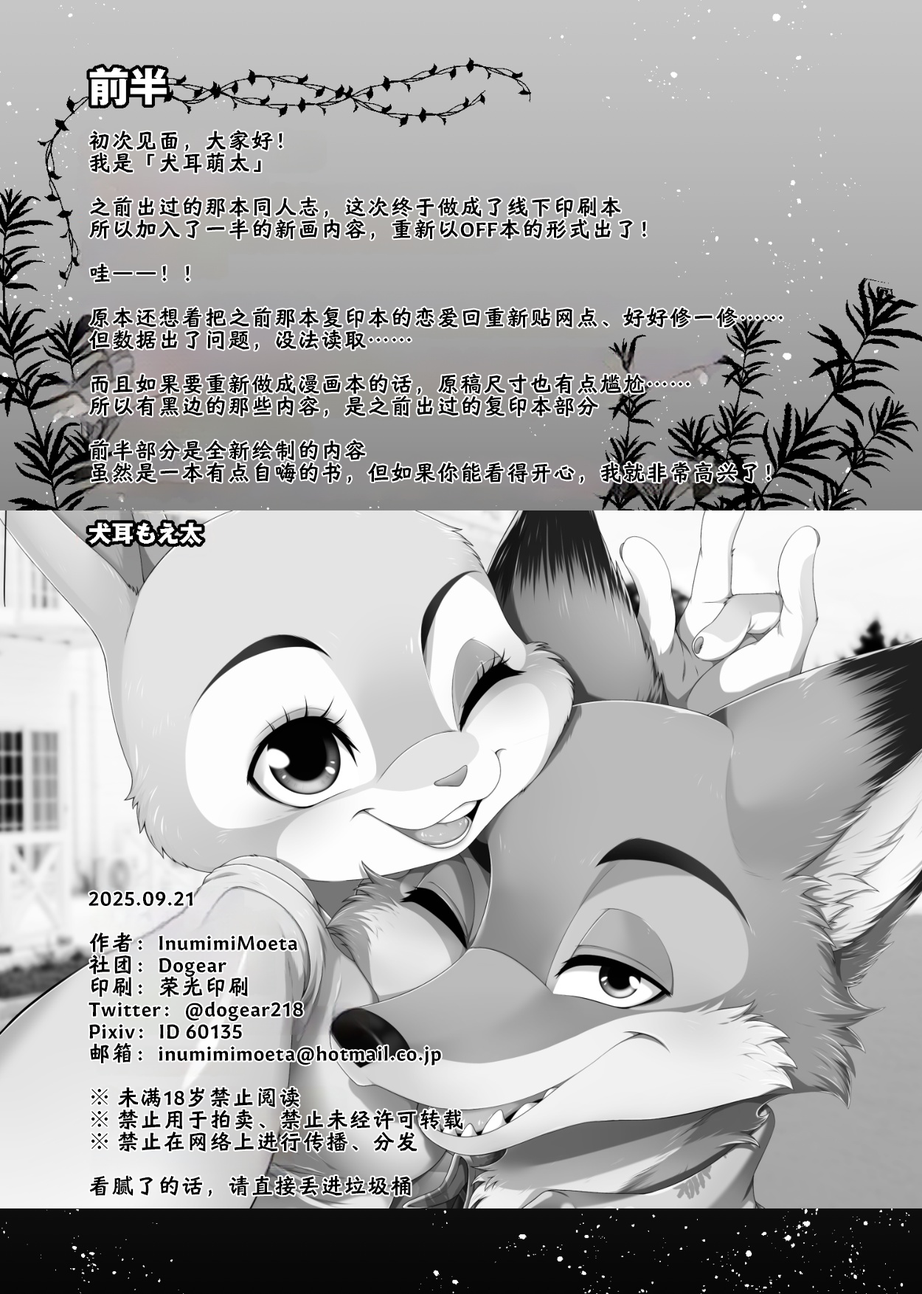
<style>
.page{position:relative;width:922px;height:1294px}
.page>*{position:absolute;margin:0}
.t1{font:22.1px/22.1px "HYShiWei75U";letter-spacing:0.05em;color:#000000}
.t2{font:22.1px/22.1px "AdobeHeitiStd-Regular";letter-spacing:0.05em;color:#000000}
</style>
<div class="page">
<p class="t1" style="left:88px;top:130px;width:695px;height:353px">初次见面，大家好！<br>我是「犬耳萌太」<br><br>之前出过的那本同人志，这次终于做成了线下印刷本<br>所以加入了一半的新画内容，重新以OFF本的形式出了！<br><br>哇——！！<br><br>原本还想着把之前那本复印本的恋爱回重新贴网点、好好修一修……<br>但数据出了问题，没法读取……<br><br>而且如果要重新做成漫画本的话，原稿尺寸也有点尴尬……<br>所以有黑边的那些内容，是之前出过的复印本部分<br><br>前半部分是全新绘制的内容<br>虽然是一本有点自嗨的书，但如果你能看得开心，我就非常高兴了！</p>
<p class="t1" style="left:88px;top:891px;width:375px;height:305px">2025.09.21<br><br>作者：InumimiMoeta  <br>社团：Dogear  <br>印刷：荣光印刷  <br>Twitter：@dogear218  <br>Pixiv：ID 60135  <br>邮箱：inumimimoeta@hotmail.co.jp  <br><br><span class="t2">※</span> 未满18岁禁止阅读  <br><span class="t2">※</span> 禁止用于拍卖、禁止未经许可转载  <br><span class="t2">※</span> 禁止在网络上进行传播、分发  <br><br>看腻了的话，请直接丢进垃圾桶</p>
</div>
